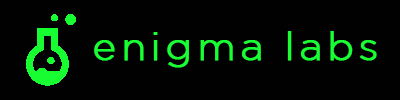
<style>
.page{position:relative;width:400px;height:100px;background:#010101}
.page>*{position:absolute;margin:0}
.t1{font:40px "Gotham-Light";letter-spacing:0.1em;color:#18ff33;font-weight:bold}
</style>
<div class="page">
<p class="t1" style="left:94px;top:31px;width:283px;height:37px">enigma labs</p>
</div>
